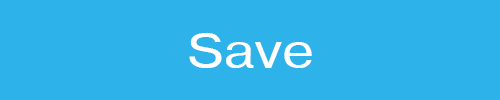
<style>
.page{position:relative;width:500px;height:100px;background:#2db2ea}
.page>*{position:absolute;margin:0}
.t1{font:48px "Helvetica";color:#ffffff;scale:1.2 1}
</style>
<div class="page">
<p class="t1" style="left:189px;top:33px;width:123px;height:35px">Save</p>
</div>
